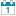
<style>
.page{position:relative;width:16px;height:16px;background:#ffffff}
.page>*{position:absolute;margin:0}
.t1{font:7.6px "Arial-BoldMT";scale:0.95 1}
</style>
<div class="page">
<p class="t1" style="left:6px;top:7px;width:3px;height:6px">1</p>
</div>
